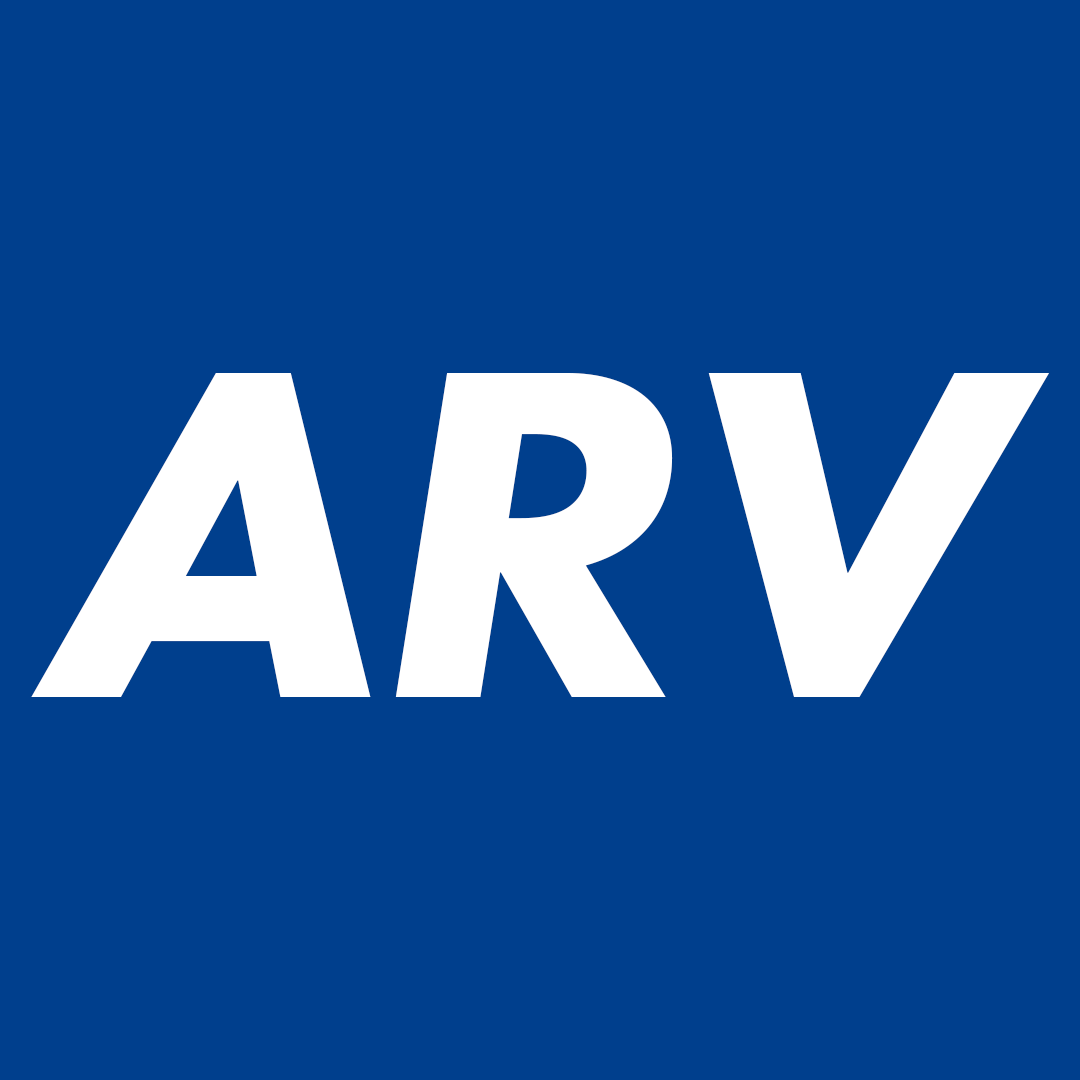
<style>
.page{position:relative;width:1080px;height:1080px;background:#003f8d}
.page>*{position:absolute;margin:0}
.t1{font:430px "LuzSans-BoldItalic";color:#ffffff}
</style>
<div class="page">
<p class="t1" style="left:31px;top:373px;width:1018px;height:324px">ARV</p>
</div>
